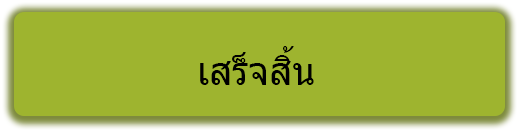
<style>
.page{position:relative;width:520px;height:133px;background:#9eb42f}
.page>*{position:absolute;margin:0}
.t1{font:37.5px "Tahoma";color:#000000}
</style>
<div class="page">
<p class="t1" style="left:200px;top:46px;width:114px;height:39px">เสร็จสิ้น</p>
</div>
